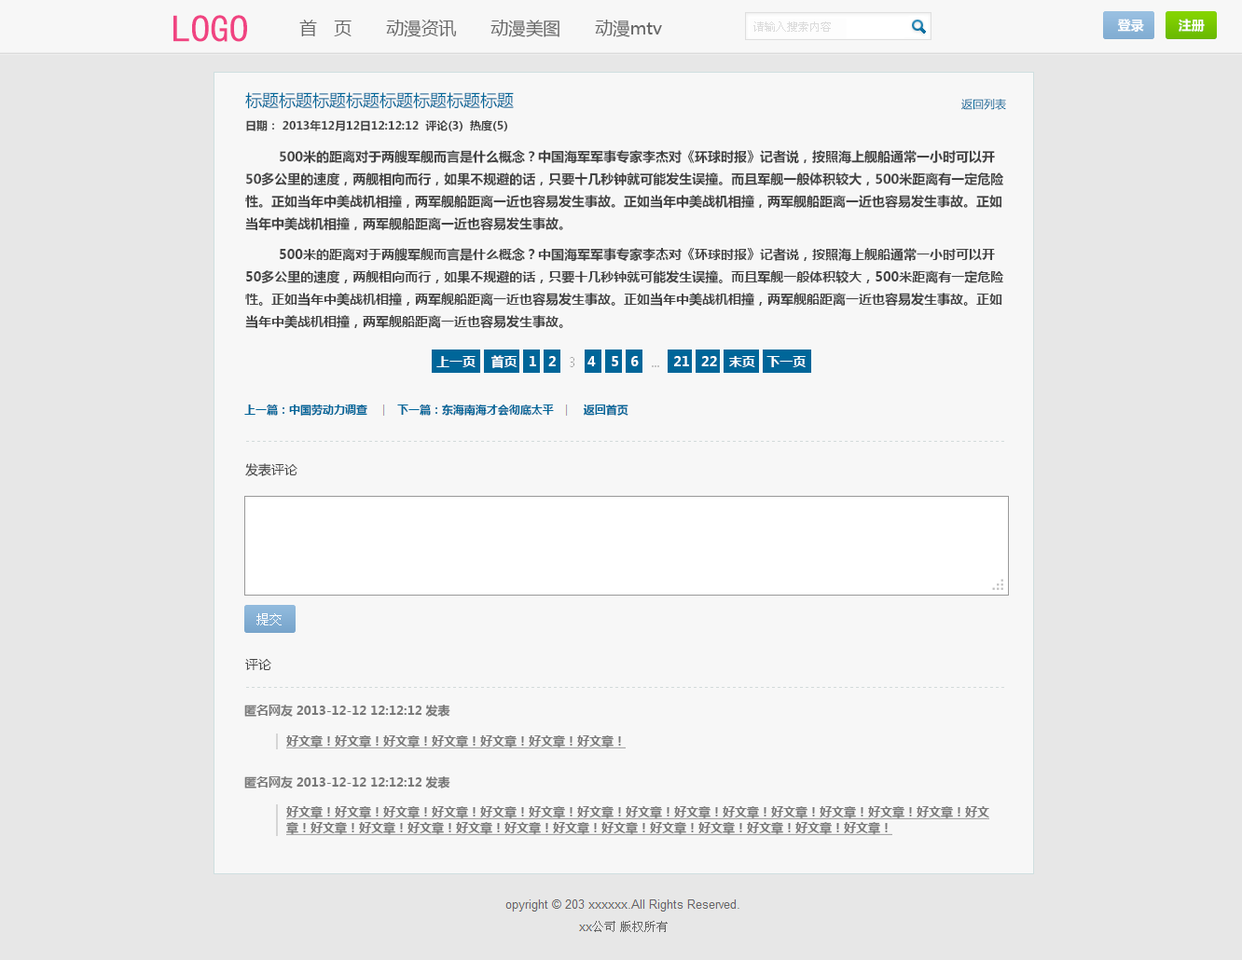
<style>
.page{position:relative;width:1242px;height:960px;background:#f7f7f7}
.page>*{position:absolute;margin:0}
.t1{font:38.5px "SimHei";color:#f04381}
.t2{font:17.4px "MicrosoftYaHei";color:#666666}
.t3{font:11.2px "SimSun";color:#dbdbdb}
.t4{font:13.1px "MicrosoftYaHei";color:#ffffff}
.t5{font:16.8px "MicrosoftYaHei";color:#006699}
.t6{font:11.2px "MicrosoftYaHei";color:#006699}
.t7{font:11.2px "MicrosoftYaHei";color:#444444}
.t8{font:13.1px/22.4px "MicrosoftYaHei";color:#444444}
.t9{font:13.1px "MicrosoftYaHei";letter-spacing:-0.001em;color:#ffffff}
.t10{font:11.2px "MicrosoftYaHei";letter-spacing:-0.001em;color:#006699}
.t11{font:13.1px "MicrosoftYaHei";letter-spacing:-0.001em;color:#444444}
.t12{font:12.1px "MicrosoftYaHei";color:#797979}
.t13{font:12.1px "MicrosoftYaHei";letter-spacing:-0.001em;color:#797979}
.t14{font:12.1px "MicrosoftYaHei";color:#797979;text-decoration:underline}
.t15{font:12.1px/15.8px "MicrosoftYaHei";color:#797979;text-decoration:underline}
</style>
<div class="page">
<p class="t1" style="left:173px;top:15px;width:74px;height:27px">LOGO</p>
<p class="t2" style="left:299px;top:20px;width:363px;height:17px">首　页　　动漫资讯　　动漫美图　　动漫mtv</p>
<p class="t3" style="left:753px;top:21px;width:78px;height:11px">请输入搜索内容</p>
<p class="t4" style="left:1117px;top:19px;width:27px;height:13px">登录</p>
<p class="t4" style="left:1178px;top:19px;width:27px;height:13px">注册</p>
<p class="t5" style="left:245px;top:92px;width:269px;height:17px">标题标题标题标题标题标题标题标题</p>
<p class="t6" style="left:961px;top:99px;width:45px;height:11px">返回列表</p>
<p class="t7" style="left:246px;top:120px;width:261px;height:11px">日期： 2013年12月12日12:12:12  评论(3)  热度(5)</p>
<p class="t8" style="left:245px;top:150px;width:758px;height:80px">500米的距离对于两艘军舰而言是什么概念？中国海军军事专家李杰对《环球时报》记者说，按照海上舰船通常一小时可以开50多公里的速度，两舰相向而行，如果不规避的话，只要十几秒钟就可能发生误撞。而且军舰一般体积较大，500米距离有一定危险性。正如当年中美战机相撞，两军舰船距离一近也容易发生事故。正如当年中美战机相撞，两军舰船距离一近也容易发生事故。正如当年中美战机相撞，两军舰船距离一近也容易发生事故。</p>
<p class="t8" style="left:245px;top:248px;width:759px;height:80px">500米的距离对于两艘军舰而言是什么概念？中国海军军事专家李杰对《环球时报》记者说，按照海上舰船通常一小时可以开50多公里的速度，两舰相向而行，如果不规避的话，只要十几秒钟就可能发生误撞。而且军舰一般体积较大，500米距离有一定危险性。正如当年中美战机相撞，两军舰船距离一近也容易发生事故。正如当年中美战机相撞，两军舰船距离一近也容易发生事故。正如当年中美战机相撞，两军舰船距离一近也容易发生事故。</p>
<p class="t9" style="left:436px;top:355px;width:369px;height:13px">上一页    首页   1   2        4    5   6         21   22   末页   下一页</p>
<p class="t10" style="left:244px;top:404px;width:384px;height:12px">上一篇：中国劳动力调查         下一篇：东海南海才会彻底太平         返回首页</p>
<p class="t11" style="left:245px;top:463px;width:52px;height:13px">发表评论</p>
<p class="t11" style="left:245px;top:659px;width:26px;height:11px">评论</p>
<p class="t12" style="left:244px;top:705px;width:206px;height:12px"><span class="t13">匿名网友 </span>2013-12-12 12:12:12<span class="t13"> 发表</span></p>
<p class="t14" style="left:286px;top:736px;width:340px;height:13px">好文章！好文章！好文章！好文章！好文章！好文章！好文章！</p>
<p class="t12" style="left:244px;top:777px;width:206px;height:12px"><span class="t13">匿名网友 </span>2013-12-12 12:12:12<span class="t13"> 发表</span></p>
<p class="t15" style="left:286px;top:806px;width:703px;height:29px">好文章！好文章！好文章！好文章！好文章！好文章！好文章！好文章！好文章！好文章！好文章！好文章！好文章！好文章！好文<br>章！好文章！好文章！好文章！好文章！好文章！好文章！好文章！好文章！好文章！好文章！好文章！好文章！</p>
</div>
